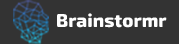
<style>
.page{position:relative;width:179px;height:44px;background:#333333}
.page>*{position:absolute;margin:0}
.t1{font:18.7px "ExoSoft-ExtraBold";color:#ffffff}
</style>
<div class="page">
<p class="t1" style="left:57px;top:13px;width:110px;height:15px">Brainstormr</p>
</div>
